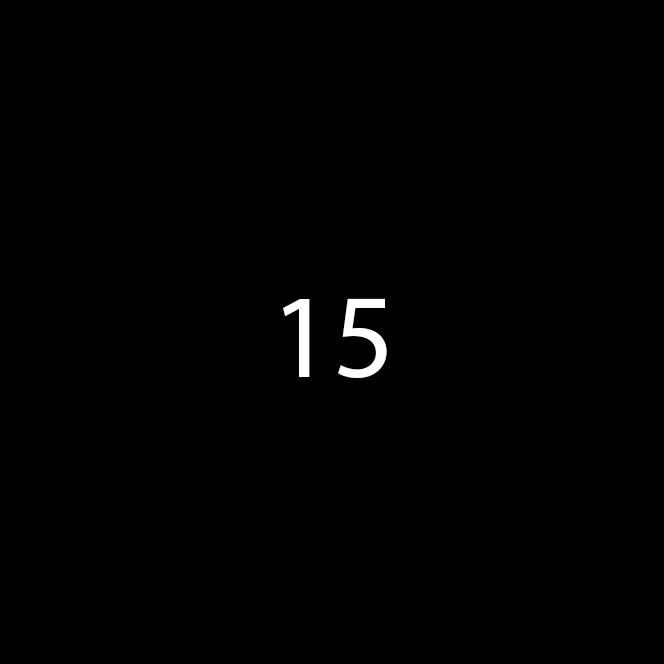
<style>
.page{position:relative;width:664px;height:664px;background:#000000}
.page>*{position:absolute;margin:0}
.t1{font:120px "MyriadPro-Regular";color:#ffffff}
</style>
<div class="page">
<p class="t1" style="left:283px;top:298px;width:104px;height:80px">15</p>
</div>
